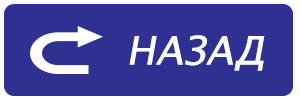
<style>
.page{position:relative;width:300px;height:100px;background:#2e3192}
.page>*{position:absolute;margin:0}
.t1{font:39px "LucidaSansUnicode";color:#ffffff;text-transform:uppercase;font-weight:bold;font-style:italic}
.t2{font:18px "Tahoma";color:#ffffff}
</style>
<div class="page">
<p class="t1" style="left:129px;top:35px;width:136px;height:36px"><span class="t2"><br></span>       НАЗАД</p>
</div>
